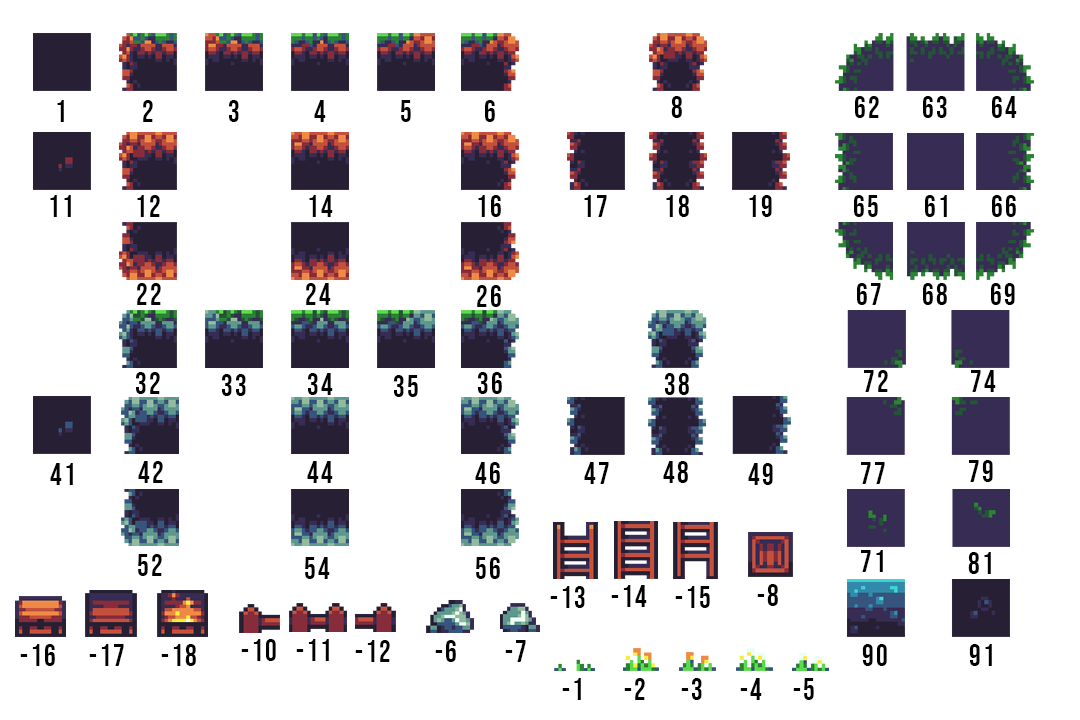
<style>
.page{position:relative;width:1080px;height:720px;background:#ffffff}
.page>*{position:absolute;margin:0}
.t1{font:30.2px "BebasNeue-Regular";letter-spacing:0.07em;color:#000000;scale:0.97 1}
</style>
<div class="page">
<p class="t1" style="left:57px;top:100px;width:7px;height:22px">1</p>
<p class="t1" style="left:143px;top:100px;width:10px;height:22px">2</p>
<p class="t1" style="left:229px;top:100px;width:10px;height:22px">3</p>
<p class="t1" style="left:314px;top:100px;width:12px;height:22px">4</p>
<p class="t1" style="left:401px;top:100px;width:10px;height:22px">5</p>
<p class="t1" style="left:485px;top:100px;width:10px;height:22px">6</p>
<p class="t1" style="left:671px;top:96px;width:11px;height:22px">8</p>
<p class="t1" style="left:855px;top:96px;width:24px;height:22px">62</p>
<p class="t1" style="left:923px;top:96px;width:24px;height:22px">63</p>
<p class="t1" style="left:992px;top:96px;width:25px;height:22px">64</p>
<p class="t1" style="left:50px;top:195px;width:21px;height:22px">11</p>
<p class="t1" style="left:137px;top:195px;width:23px;height:22px">12</p>
<p class="t1" style="left:309px;top:195px;width:24px;height:22px">14</p>
<p class="t1" style="left:478px;top:195px;width:23px;height:22px">16</p>
<p class="t1" style="left:584px;top:195px;width:23px;height:22px">17</p>
<p class="t1" style="left:666px;top:195px;width:23px;height:22px">18</p>
<p class="t1" style="left:749px;top:195px;width:23px;height:22px">19</p>
<p class="t1" style="left:854px;top:195px;width:24px;height:22px">65</p>
<p class="t1" style="left:925px;top:195px;width:22px;height:22px">61</p>
<p class="t1" style="left:992px;top:195px;width:24px;height:22px">66</p>
<p class="t1" style="left:137px;top:283px;width:24px;height:22px">22</p>
<p class="t1" style="left:306px;top:283px;width:25px;height:22px">24</p>
<p class="t1" style="left:477px;top:285px;width:24px;height:22px">26</p>
<p class="t1" style="left:857px;top:283px;width:24px;height:22px">67</p>
<p class="t1" style="left:923px;top:283px;width:24px;height:22px">68</p>
<p class="t1" style="left:991px;top:283px;width:24px;height:22px">69</p>
<p class="t1" style="left:136px;top:372px;width:24px;height:22px">32</p>
<p class="t1" style="left:222px;top:374px;width:24px;height:22px">33</p>
<p class="t1" style="left:308px;top:373px;width:25px;height:22px">34</p>
<p class="t1" style="left:394px;top:375px;width:24px;height:22px">35</p>
<p class="t1" style="left:478px;top:372px;width:24px;height:22px">36</p>
<p class="t1" style="left:665px;top:373px;width:24px;height:22px">38</p>
<p class="t1" style="left:864px;top:370px;width:24px;height:22px">72</p>
<p class="t1" style="left:971px;top:370px;width:25px;height:22px">74</p>
<p class="t1" style="left:138px;top:461px;width:25px;height:22px">42</p>
<p class="t1" style="left:307px;top:461px;width:26px;height:22px">44</p>
<p class="t1" style="left:475px;top:462px;width:25px;height:22px">46</p>
<p class="t1" style="left:584px;top:462px;width:25px;height:22px">47</p>
<p class="t1" style="left:663px;top:461px;width:25px;height:22px">48</p>
<p class="t1" style="left:861px;top:462px;width:24px;height:22px">77</p>
<p class="t1" style="left:969px;top:460px;width:24px;height:22px">79</p>
<p class="t1" style="left:50px;top:463px;width:23px;height:22px">41</p>
<p class="t1" style="left:748px;top:463px;width:25px;height:22px">49</p>
<p class="t1" style="left:138px;top:554px;width:24px;height:22px">52</p>
<p class="t1" style="left:305px;top:557px;width:25px;height:22px">54</p>
<p class="t1" style="left:476px;top:557px;width:24px;height:22px">56</p>
<p class="t1" style="left:861px;top:550px;width:22px;height:22px">71</p>
<p class="t1" style="left:968px;top:552px;width:23px;height:22px">81</p>
<p class="t1" style="left:550px;top:586px;width:35px;height:22px">-13</p>
<p class="t1" style="left:611px;top:585px;width:36px;height:22px">-14</p>
<p class="t1" style="left:675px;top:586px;width:35px;height:22px">-15</p>
<p class="t1" style="left:757px;top:584px;width:21px;height:22px">-8</p>
<p class="t1" style="left:241px;top:639px;width:35px;height:22px">-10</p>
<p class="t1" style="left:296px;top:639px;width:33px;height:22px">-11</p>
<p class="t1" style="left:355px;top:640px;width:35px;height:22px">-12</p>
<p class="t1" style="left:435px;top:640px;width:21px;height:22px">-6</p>
<p class="t1" style="left:505px;top:640px;width:21px;height:22px">-7</p>
<p class="t1" style="left:20px;top:644px;width:35px;height:22px">-16</p>
<p class="t1" style="left:89px;top:644px;width:35px;height:22px">-17</p>
<p class="t1" style="left:161px;top:644px;width:35px;height:22px">-18</p>
<p class="t1" style="left:862px;top:644px;width:25px;height:22px">90</p>
<p class="t1" style="left:969px;top:644px;width:23px;height:22px">91</p>
<p class="t1" style="left:562px;top:678px;width:19px;height:22px">-1</p>
<p class="t1" style="left:624px;top:678px;width:21px;height:22px">-2</p>
<p class="t1" style="left:681px;top:678px;width:21px;height:22px">-3</p>
<p class="t1" style="left:740px;top:678px;width:22px;height:22px">-4</p>
<p class="t1" style="left:793px;top:678px;width:21px;height:22px">-5</p>
</div>
